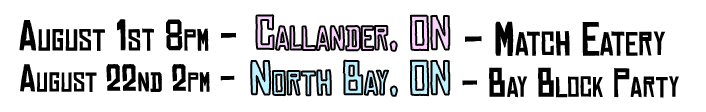
<style>
.page{position:relative;width:706px;height:112px;background:#ffffff}
.page>*{position:absolute;margin:0}
.t1{font:45.8px "ChineseRocksRg-Regular";font-variant:small-caps}
.t2{font:41.8px "ChineseRocksRg-Regular";color:#010101;font-variant:small-caps}
.t3{font:45.8px "ChineseRocksRg-Regular";color:#010101;font-variant:small-caps}
.t4{font:37.4px "ChineseRocksRg-Regular";color:#010101;font-variant:small-caps}
.t5{font:39.5px "ChineseRocksRg-Regular";color:#010101;font-variant:small-caps}
</style>
<div class="page">
<p class="t1" style="left:256px;top:15px;width:194px;height:36px">Callander, ON</p>
<p class="t2" style="left:19px;top:19px;width:217px;height:32px">August 1st 8pm -</p>
<p class="t3" style="left:465px;top:21px;width:201px;height:35px">- Match Eatery</p>
<p class="t4" style="left:20px;top:64px;width:215px;height:28px">August 22nd 2pm -</p>
<p class="t1" style="left:251px;top:60px;width:199px;height:36px">North Bay, ON</p>
<p class="t5" style="left:462px;top:67px;width:217px;height:31px">- Bay Block Party</p>
</div>
